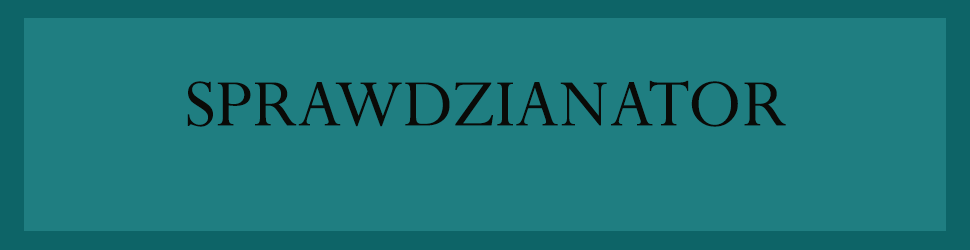
<style>
.page{position:relative;width:970px;height:250px;background:#1f7e81}
.page>*{position:absolute;margin:0}
.t1{font:75px "Perpetua";color:#0a0a07}
</style>
<div class="page">
<p class="t1" style="left:187px;top:80px;width:599px;height:47px">SPRAWDZIANATOR</p>
</div>
